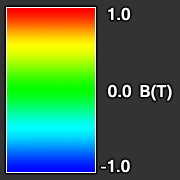
<style>
.page{position:relative;width:180px;height:180px;background:#333333}
.page>*{position:absolute;margin:0}
.t1{font:18px "Gautami-Bold";letter-spacing:-0.01em;color:#ffffff}
</style>
<div class="page">
<p class="t1" style="left:108px;top:7px;width:23px;height:14px">1.0</p>
<p class="t1" style="left:108px;top:84px;width:24px;height:14px">0.0</p>
<p class="t1" style="left:140px;top:84px;width:32px;height:17px">B(T)</p>
<p class="t1" style="left:101px;top:159px;width:29px;height:14px">-1.0</p>
</div>
